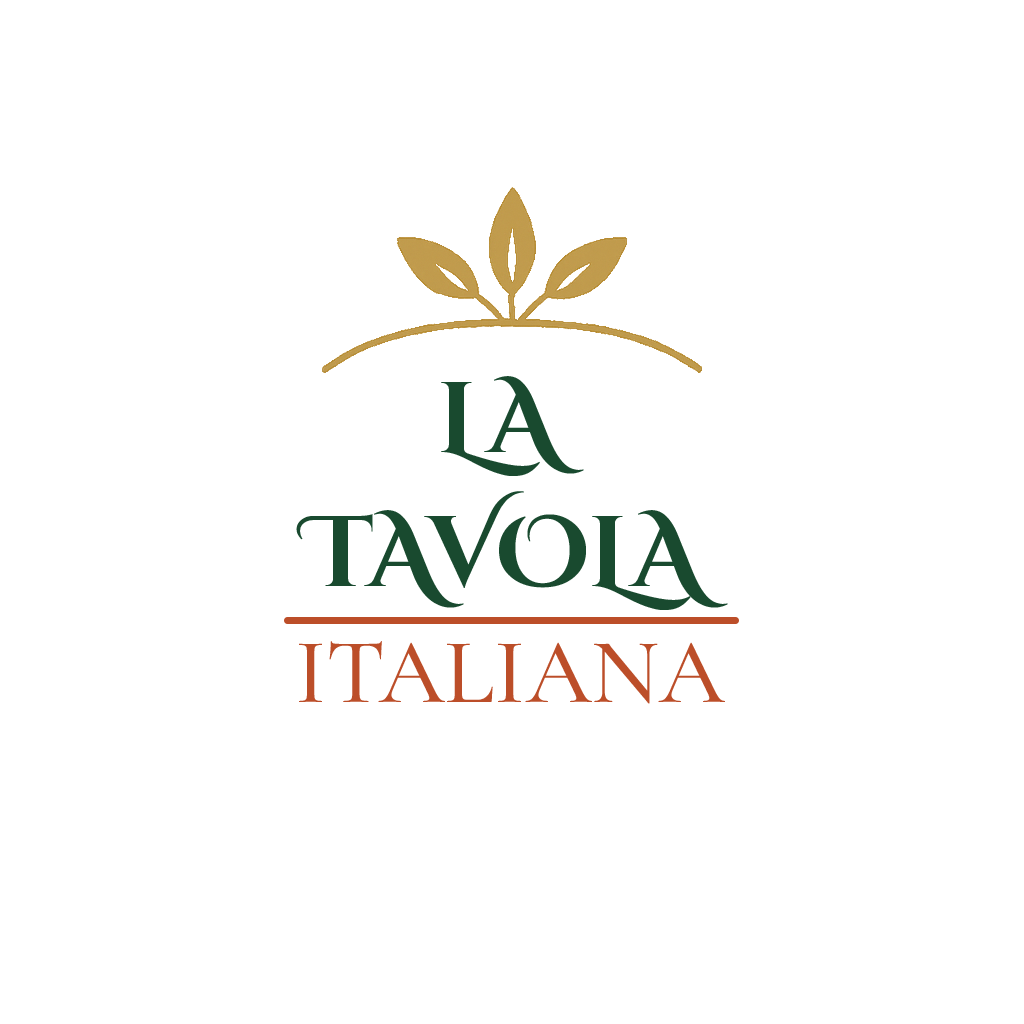
<style>
.page{position:relative;width:1024px;height:1024px;background:#ffffff}
.page>*{position:absolute;margin:0}
.t1{font:100px "CinzelDecorative-Bold";letter-spacing:0.072em;color:#194a2f;text-transform:uppercase}
.t2{font:100px "CinzelDecorative-Bold";color:#194a2f;text-transform:uppercase}
.t3{font:93.1px "CormorantGaramond-Medium";color:#bc4e29;text-transform:uppercase}
</style>
<div class="page">
<p class="t1" style="left:441px;top:376px;width:143px;height:100px">LA</p>
<p class="t2" style="left:296px;top:491px;width:432px;height:119px">Tavola</p>
<p class="t3" style="left:299px;top:641px;width:426px;height:63px">Italiana</p>
</div>
